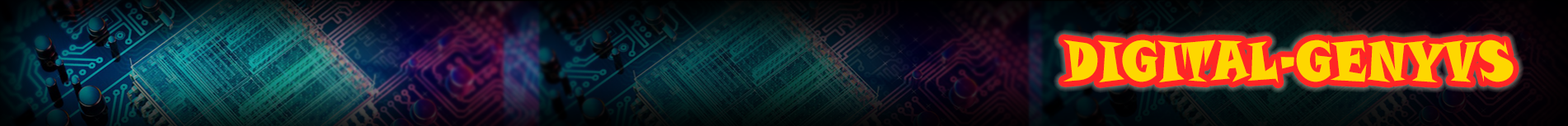
<style>
.page{position:relative;width:1568px;height:126px}
.page>*{position:absolute;margin:0}
.t1{font:55.4px "SnapITC-Regular";color:#fed700;scale:0.76 1}
</style>
<div class="page">
<p class="t1" style="left:1063px;top:40px;width:451px;height:43px">DIGITAL-GENYVS</p>
</div>
